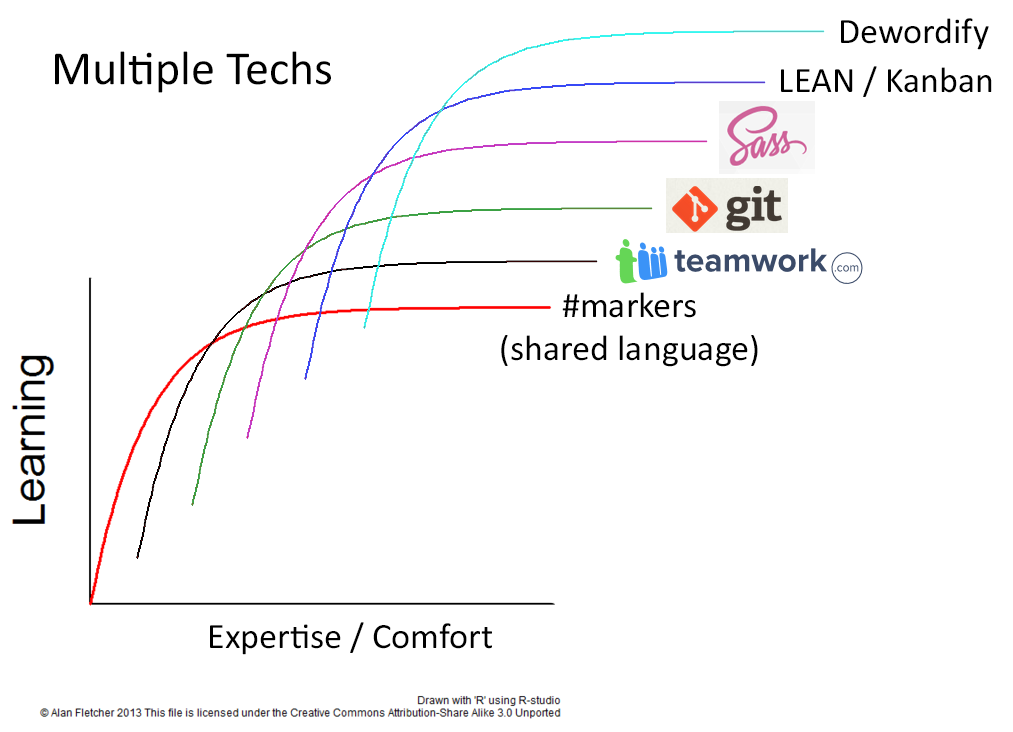
<style>
.page{position:relative;width:1013px;height:732px;background:#ffffff}
.page>*{position:absolute;margin:0}
.t1{font:36px "Calibri";color:#000000}
.t2{font:48px "Calibri";color:#000000}
</style>
<div class="page">
<p class="t1" style="left:841px;top:18px;width:148px;height:32px">Dewordify</p>
<p class="t2" style="left:55px;top:51px;width:276px;height:42px">Multiple Techs</p>
<p class="t1" style="left:781px;top:66px;width:211px;height:31px">LEAN / Kanban</p>
<p class="t1" style="left:501px;top:292px;width:257px;height:75px;text-align:center">#markers<br>(shared language)</p>
<p class="t1" style="left:210px;top:622px;width:282px;height:33px">Expertise / Comfort</p>
</div>
